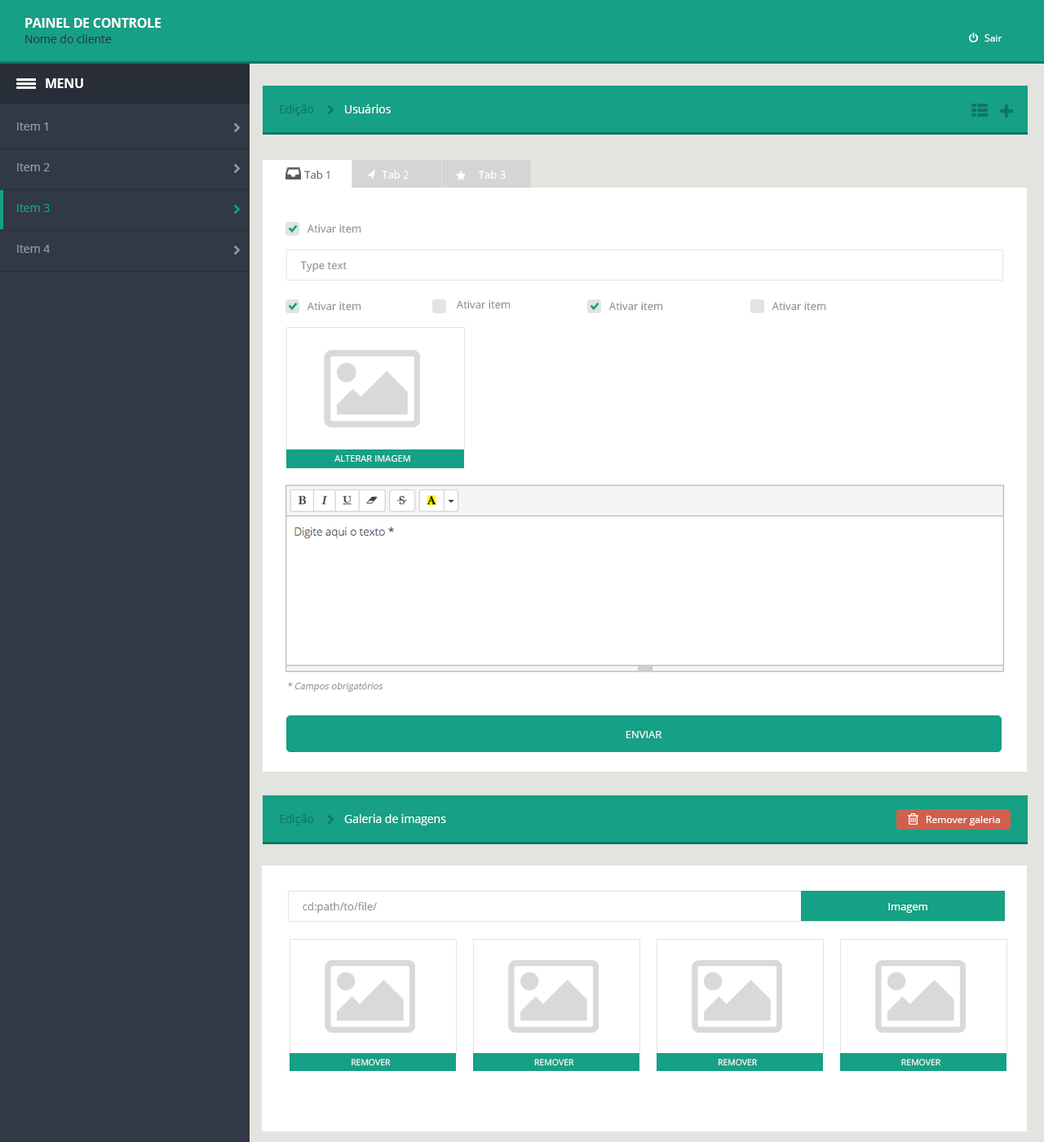
<style>
.page{position:relative;width:1044px;height:1142px;background:#ffffff}
.page>*{position:absolute;margin:0}
.t1{font:12.6px "OpenSans-Bold";color:#ffffff}
.t2{font:11.4px "OpenSans";color:#2c3945}
.t3{font:9.9px "OpenSans";color:#ffffff}
.t4{font:11.4px "OpenSans";color:#0f7763}
.t5{font:11.4px "OpenSans";color:#fefefe}
.t6{font:11.4px "OpenSans";color:#8f9ba7}
.t7{font:10.6px "OpenSans";color:#6a6a6a}
.t8{font:10.6px "OpenSans";color:#ffffff}
.t9{font:11.4px "OpenSans";color:#16a085}
.t10{font:10.8px "OpenSans";color:#929292}
.t11{font:9.1px "OpenSans";color:#f6f6f6}
.t12{font:9.1px "OpenSans";color:#929292;font-style:italic}
.t13{font:10.6px "OpenSans";color:#f6f6f6}
.t14{font:8.5px "OpenSans";color:#f6f6f6}
</style>
<div class="page">
<p class="t1" style="left:25px;top:18px;width:136px;height:10px">PAINEL DE CONTROLE</p>
<p class="t2" style="left:25px;top:34px;width:87px;height:9px">Nome do cliente</p>
<p class="t3" style="left:985px;top:34px;width:18px;height:8px">Sair</p>
<p class="t1" style="left:46px;top:78px;width:37px;height:10px">MENU</p>
<p class="t4" style="left:280px;top:104px;width:33px;height:12px">Edição</p>
<p class="t5" style="left:345px;top:104px;width:46px;height:9px">Usuários</p>
<p class="t6" style="left:17px;top:122px;width:31px;height:9px">Item 1</p>
<p class="t6" style="left:17px;top:163px;width:33px;height:8px">Item 2</p>
<p class="t7" style="left:304px;top:170px;width:26px;height:9px">Tab 1</p>
<p class="t8" style="left:382px;top:170px;width:27px;height:9px">Tab 2</p>
<p class="t8" style="left:478px;top:170px;width:28px;height:9px">Tab 3</p>
<p class="t9" style="left:17px;top:204px;width:33px;height:8px">Item 3</p>
<p class="t10" style="left:307px;top:224px;width:54px;height:9px">Ativar item</p>
<p class="t6" style="left:17px;top:245px;width:34px;height:8px">Item 4</p>
<p class="t10" style="left:300px;top:261px;width:47px;height:11px">Type text</p>
<p class="t10" style="left:307px;top:302px;width:54px;height:9px">Ativar item</p>
<p class="t10" style="left:456px;top:300px;width:55px;height:9px">Ativar item</p>
<p class="t10" style="left:609px;top:302px;width:54px;height:9px">Ativar item</p>
<p class="t10" style="left:772px;top:302px;width:54px;height:9px">Ativar item</p>
<p class="t11" style="left:334px;top:455px;width:76px;height:7px">ALTERAR IMAGEM</p>
<p class="t12" style="left:288px;top:682px;width:95px;height:10px">* Campos obrigatórios</p>
<p class="t13" style="left:626px;top:731px;width:36px;height:7px">ENVIAR</p>
<p class="t4" style="left:280px;top:814px;width:33px;height:12px">Edição</p>
<p class="t5" style="left:344px;top:814px;width:102px;height:12px">Galeria de imagens</p>
<p class="t3" style="left:927px;top:816px;width:73px;height:10px">Remover galeria</p>
<p class="t10" style="left:303px;top:901px;width:74px;height:13px">cd:path/to/file/</p>
<p class="t8" style="left:888px;top:903px;width:39px;height:10px">Imagem</p>
<p class="t14" style="left:352px;top:1059px;width:39px;height:7px">REMOVER</p>
<p class="t14" style="left:534px;top:1059px;width:40px;height:7px">REMOVER</p>
<p class="t14" style="left:718px;top:1059px;width:39px;height:7px">REMOVER</p>
<p class="t14" style="left:901px;top:1059px;width:40px;height:7px">REMOVER</p>
</div>
